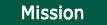
<style>
.page{position:relative;width:107px;height:25px;background:#005941}
.page>*{position:absolute;margin:0}
.t1{font:18px "Tahoma";letter-spacing:0.02em;color:#ffffff;font-weight:bold}
</style>
<div class="page">
<p class="t1" style="left:22px;top:5px;width:62px;height:15px">Mission</p>
</div>
